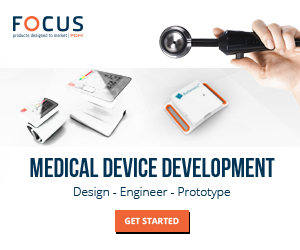
<style>
.page{position:relative;width:300px;height:250px;background:#ffffff}
.page>*{position:absolute;margin:0}
.t1{font:26px "BebasNeueBold";color:#003354;text-transform:uppercase}
.t2{font:12px "OpenSans-Light";color:#003354}
.t3{font:8.5px "OpenSans-Bold";color:#ffffff}
</style>
<div class="page">
<p class="t1" style="left:30px;top:158px;width:245px;height:19px">medical device development</p>
<p class="t2" style="left:74px;top:187px;width:156px;height:12px">Design - Engineer - Prototype</p>
<p class="t3" style="left:124px;top:217px;width:55px;height:8px">GET STARTED</p>
</div>
